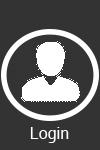
<style>
.page{position:relative;width:100px;height:150px;background:#333333}
.page>*{position:absolute;margin:0}
.t1{font:16.1px "MicrosoftSansSerif";color:#ffffff}
</style>
<div class="page">
<p class="t1" style="left:30px;top:127px;width:39px;height:16px">Login</p>
</div>
